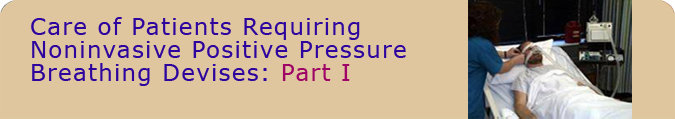
<style>
.page{position:relative;width:675px;height:119px;background:#dfc69e}
.page>*{position:absolute;margin:0}
.t1{font:23.2px/23.2px "Verdana";letter-spacing:0.05em;color:#2d059e}
.t2{font:23.2px/23.2px "Verdana";letter-spacing:0.05em;color:#9e0566}
</style>
<div class="page">
<p class="t1" style="left:31px;top:17px;width:375px;height:69px">Care of Patients Requiring<br>Noninvasive Positive Pressure<br>Breathing Devises: <span class="t2">Part I</span></p>
</div>
